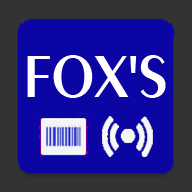
<style>
.page{position:relative;width:192px;height:192px;background:#0b05a3}
.page>*{position:absolute;margin:0}
.t1{font:60.9px "PeignotD-Med";color:#ffffff;scale:0.93 1}
</style>
<div class="page">
<p class="t1" style="left:27px;top:55px;width:139px;height:43px">FOX'S</p>
</div>
